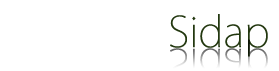
<style>
.page{position:relative;width:279px;height:71px;background:#ffffff}
.page>*{position:absolute;margin:0}
.t1{font:41.7px "KozGoPro-ExtraLight";color:#233810}
</style>
<div class="page">
<p class="t1" style="left:170px;top:14px;width:98px;height:43px">Sidap</p>
</div>
